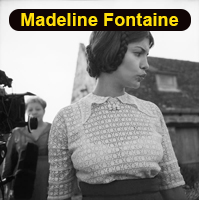
<style>
.page{position:relative;width:199px;height:200px}
.page>*{position:absolute;margin:0}
.t1{font:18px "Arial-BoldMT";letter-spacing:0.005em;color:#ffdf0b}
</style>
<div class="page">
<p class="t1" style="left:21px;top:13px;width:158px;height:13px">Madeline Fontaine</p>
</div>
